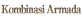
<style>
.page{position:relative;width:83px;height:18px;background:#ffffff}
.page>*{position:absolute;margin:0}
.t1{font:11px "RyuminPro-ExBold";letter-spacing:-0.12em;color:#7c6a54;font-weight:bold;scale:0.9 1}
</style>
<div class="page">
<p class="t1" style="left:1px;top:4px;width:81px;height:10px">Kombinasi Armada</p>
</div>
